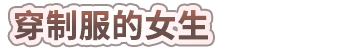
<style>
.page{position:relative;width:360px;height:50px;background:#ffffff}
.page>*{position:absolute;margin:0}
.t1{font:32px "SourceHanSansSC-Bold";color:#73534d;font-weight:bold}
</style>
<div class="page">
<p class="t1" style="left:14px;top:9px;width:194px;height:32px">穿制服的女生</p>
</div>
